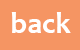
<style>
.page{position:relative;width:80px;height:50px;background:#f59563}
.page>*{position:absolute;margin:0}
.t1{font:30px "Candara-Bold";color:#ffffff}
</style>
<div class="page">
<p class="t1" style="left:11px;top:12px;width:60px;height:21px">back</p>
</div>
